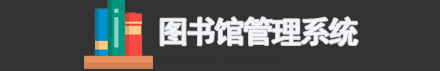
<style>
.page{position:relative;width:440px;height:71px;background:#333333}
.page>*{position:absolute;margin:0}
.t1{font:30px "SimHei";letter-spacing:-0.08em;color:#f0f7fc;font-weight:bold}
</style>
<div class="page">
<p class="t1" style="left:160px;top:17px;width:198px;height:29px">图书馆管理系统</p>
</div>
